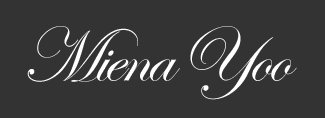
<style>
.page{position:relative;width:325px;height:118px;background:#333333}
.page>*{position:absolute;margin:0}
.t1{font:77.9px "EdwardianScriptITC";letter-spacing:-0.045em;color:#ffffff}
</style>
<div class="page">
<p class="t1" style="left:27px;top:26px;width:270px;height:74px">Miena Yoo</p>
</div>
